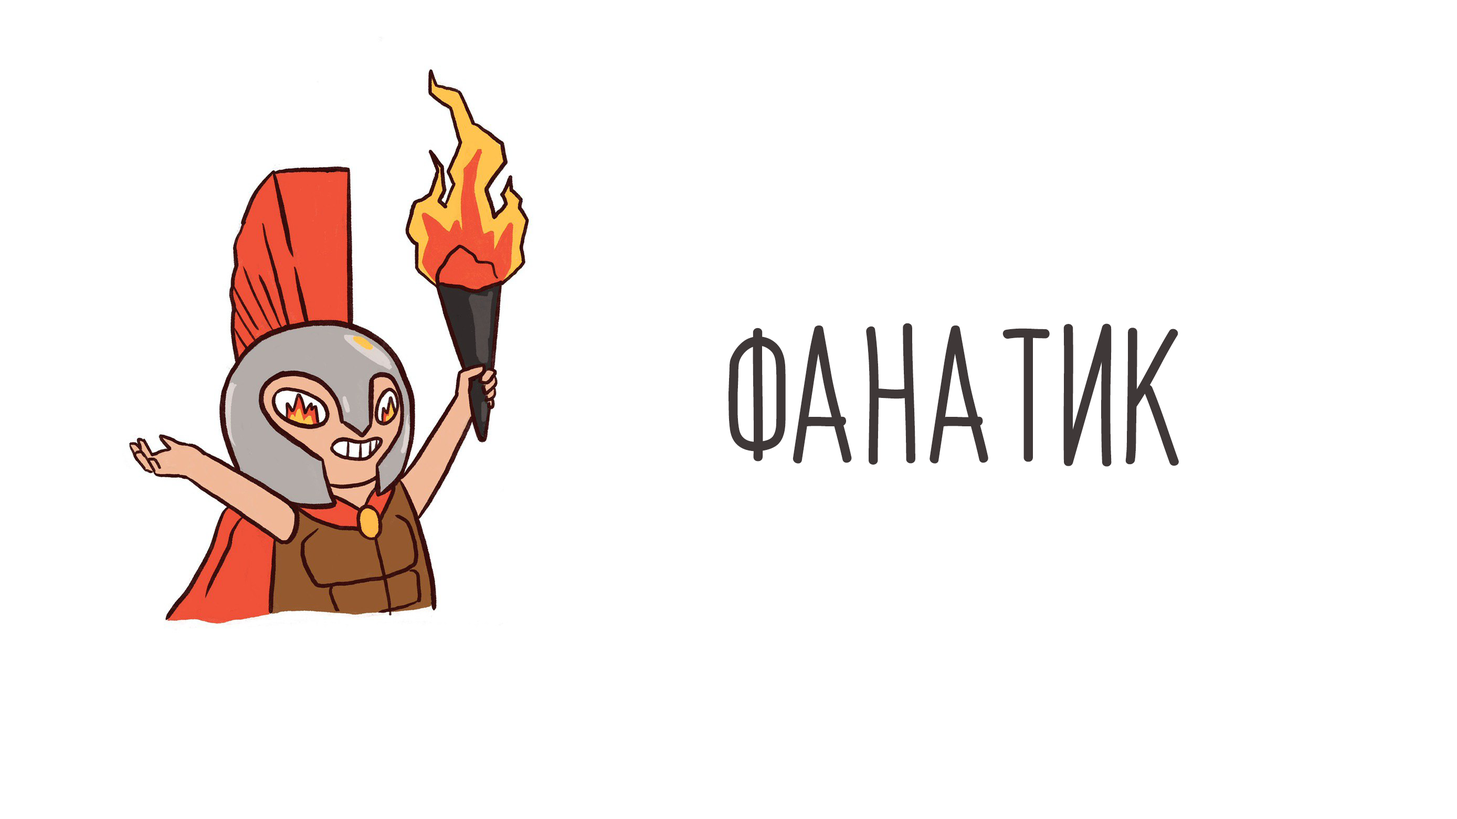
<style>
.page{position:relative;width:1457px;height:819px;background:#ffffff}
.page>*{position:absolute;margin:0}
.t1{font:115.9px "PapayaSunrise";color:#3f3838}
</style>
<div class="page">
<p class="t1" style="left:728px;top:323px;width:451px;height:143px">ФАНАТИК</p>
</div>
